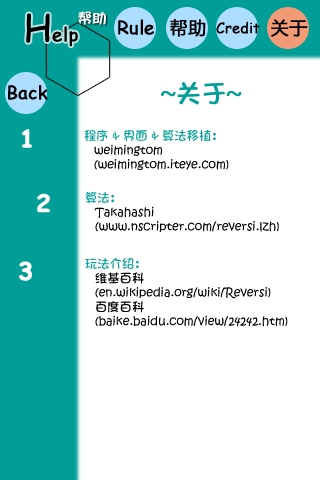
<style>
.page{position:relative;width:320px;height:480px;background:#ffffff}
.page>*{position:absolute;margin:0}
.t1{font:18px "ComicSansMS";color:#000000;font-weight:bold}
.t2{font:36px "ComicSansMS";color:#000000;font-weight:bold}
.t3{font:14px "Lolita-V2";color:#ffffff;font-weight:bold}
.t4{font:18px "MicrosoftYaHei";color:#000000;font-weight:bold}
.t5{font:14px "ComicSansMS";color:#000000;font-weight:bold}
.t6{font:24px "Lolita-V2";color:#009e96;font-weight:bold}
.t7{font:24px "ComicSansMS-Bold";color:#ffffff;font-weight:bold}
.t8{font:12px "Lolita-V2";color:#000000}
.t9{font:12px "Lolita-V2";color:#009e96}
</style>
<div class="page">
<p class="t1" style="left:26px;top:13px;width:52px;height:34px"><span class="t2">H</span>elp</p>
<p class="t3" style="left:78px;top:11px;width:28px;height:14px">帮助</p>
<p class="t1" style="left:118px;top:19px;width:36px;height:16px">Rule</p>
<p class="t4" style="left:170px;top:19px;width:36px;height:18px">帮助</p>
<p class="t5" style="left:216px;top:21px;width:44px;height:13px">Credit</p>
<p class="t4" style="left:271px;top:19px;width:37px;height:18px">关于</p>
<p class="t1" style="left:8px;top:85px;width:40px;height:15px">Back</p>
<p class="t6" style="left:161px;top:82px;width:81px;height:23px">~关于~</p>
<p class="t7" style="left:22px;top:129px;width:10px;height:19px">1</p>
<p class="t8" style="left:84px;top:129px;width:145px;height:41px"><span class="t9">程序 &amp; 界面 &amp; 算法移植： <br></span>weimingtom<br>(weimingtom.iteye.com)</p>
<p class="t7" style="left:37px;top:193px;width:13px;height:20px">2</p>
<p class="t8" style="left:86px;top:192px;width:193px;height:40px"><span class="t9">算法：<br></span>Takahashi <br>(www.nscripter.com/reversi.lzh)</p>
<p class="t7" style="left:19px;top:261px;width:13px;height:20px">3</p>
<p class="t8" style="left:85px;top:258px;width:203px;height:69px"><span class="t9">玩法介绍：<br></span>维基百科 <br>(en.wikipedia.org/wiki/Reversi)<br>百度百科<br>(baike.baidu.com/view/24242.htm)</p>
</div>
